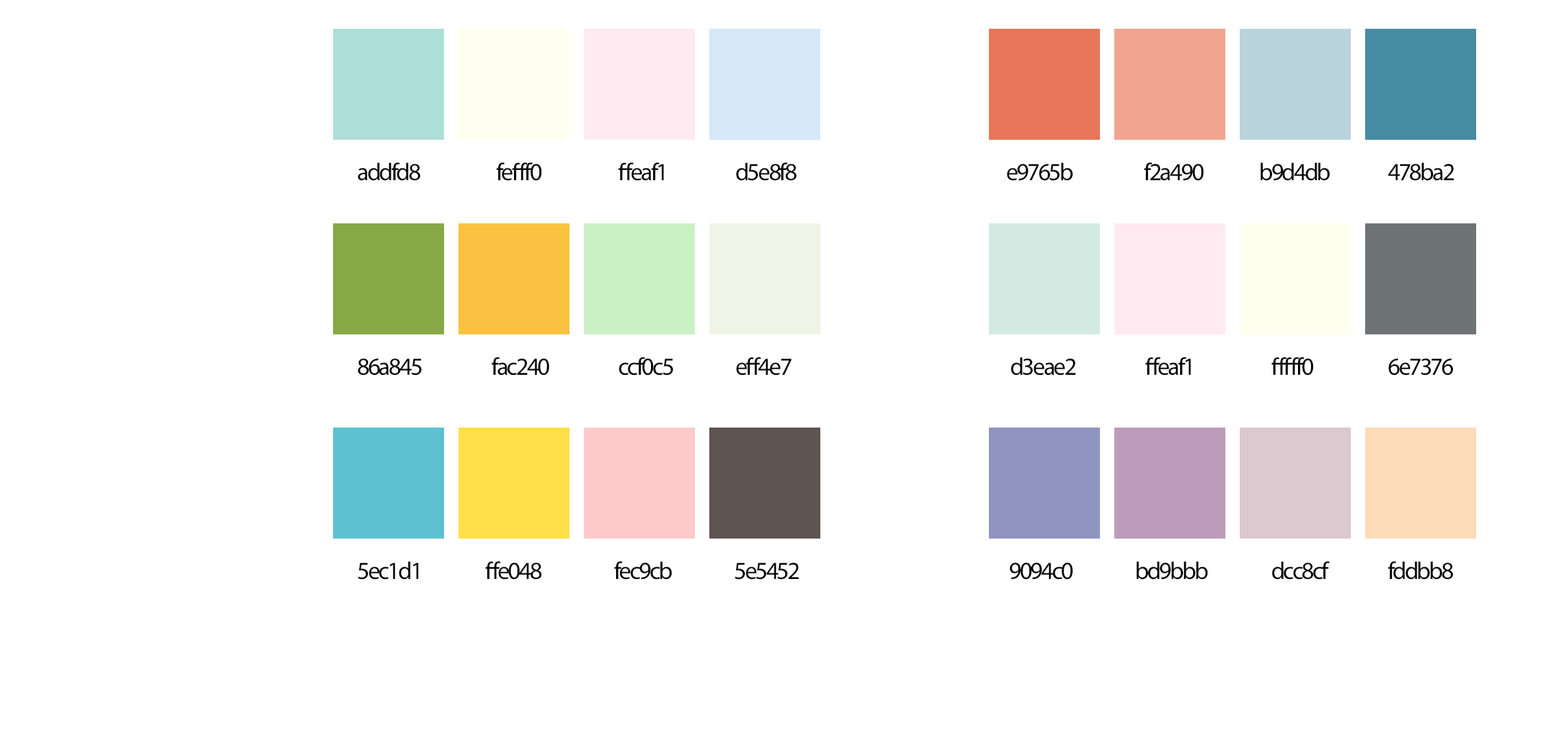
<style>
.page{position:relative;width:1568px;height:740px;background:#ffffff}
.page>*{position:absolute;margin:0}
.t1{font:24.7px "MyriadPro-Regular";letter-spacing:-0.075em;color:#000000}
</style>
<div class="page">
<p class="t1" style="left:358px;top:162px;width:62px;height:19px">addfd8</p>
<p class="t1" style="left:496px;top:162px;width:45px;height:19px">fefff0</p>
<p class="t1" style="left:618px;top:162px;width:46px;height:19px">ffeaf1</p>
<p class="t1" style="left:736px;top:162px;width:61px;height:19px">d5e8f8</p>
<p class="t1" style="left:1007px;top:162px;width:66px;height:19px">e9765b</p>
<p class="t1" style="left:1144px;top:162px;width:59px;height:19px">f2a490</p>
<p class="t1" style="left:1260px;top:162px;width:70px;height:19px">b9d4db</p>
<p class="t1" style="left:1388px;top:162px;width:66px;height:19px">478ba2</p>
<p class="t1" style="left:358px;top:358px;width:63px;height:18px">86a845</p>
<p class="t1" style="left:491px;top:357px;width:59px;height:19px">fac240</p>
<p class="t1" style="left:619px;top:357px;width:54px;height:19px">ccf0c5</p>
<p class="t1" style="left:736px;top:357px;width:56px;height:19px">eff4e7</p>
<p class="t1" style="left:1011px;top:357px;width:65px;height:19px">d3eae2</p>
<p class="t1" style="left:1145px;top:357px;width:46px;height:19px">ffeaf1</p>
<p class="t1" style="left:1271px;top:357px;width:43px;height:19px">fffff0</p>
<p class="t1" style="left:1388px;top:358px;width:66px;height:18px">6e7376</p>
<p class="t1" style="left:358px;top:561px;width:61px;height:19px">5ec1d1</p>
<p class="t1" style="left:485px;top:561px;width:56px;height:19px">ffe048</p>
<p class="t1" style="left:614px;top:561px;width:58px;height:19px">fec9cb</p>
<p class="t1" style="left:735px;top:563px;width:64px;height:17px">5e5452</p>
<p class="t1" style="left:1009px;top:563px;width:64px;height:17px">9094c0</p>
<p class="t1" style="left:1136px;top:561px;width:72px;height:19px">bd9bbb</p>
<p class="t1" style="left:1272px;top:561px;width:58px;height:19px">dcc8cf</p>
<p class="t1" style="left:1388px;top:561px;width:66px;height:19px">fddbb8</p>
</div>
